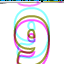
<style>
.page{position:relative;width:64px;height:64px;background:#ffffff}
.page>*{position:absolute;margin:0}
.t1{font:66px "LilitaOne"}
</style>
<div class="page">
<p class="t1" style="left:15px;top:8px;width:33px;height:48px">9</p>
</div>
